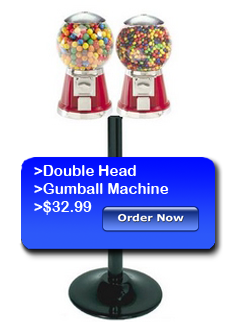
<style>
.page{position:relative;width:238px;height:322px;background:#ffffff}
.page>*{position:absolute;margin:0}
.t1{font:15px "ArialRoundedMTBold";color:#ffffff}
</style>
<div class="page">
<p class="t1" style="left:34px;top:165px;width:135px;height:50px">&gt;Double Head<br>&gt;Gumball Machine <br>&gt;$32.99</p>
</div>
